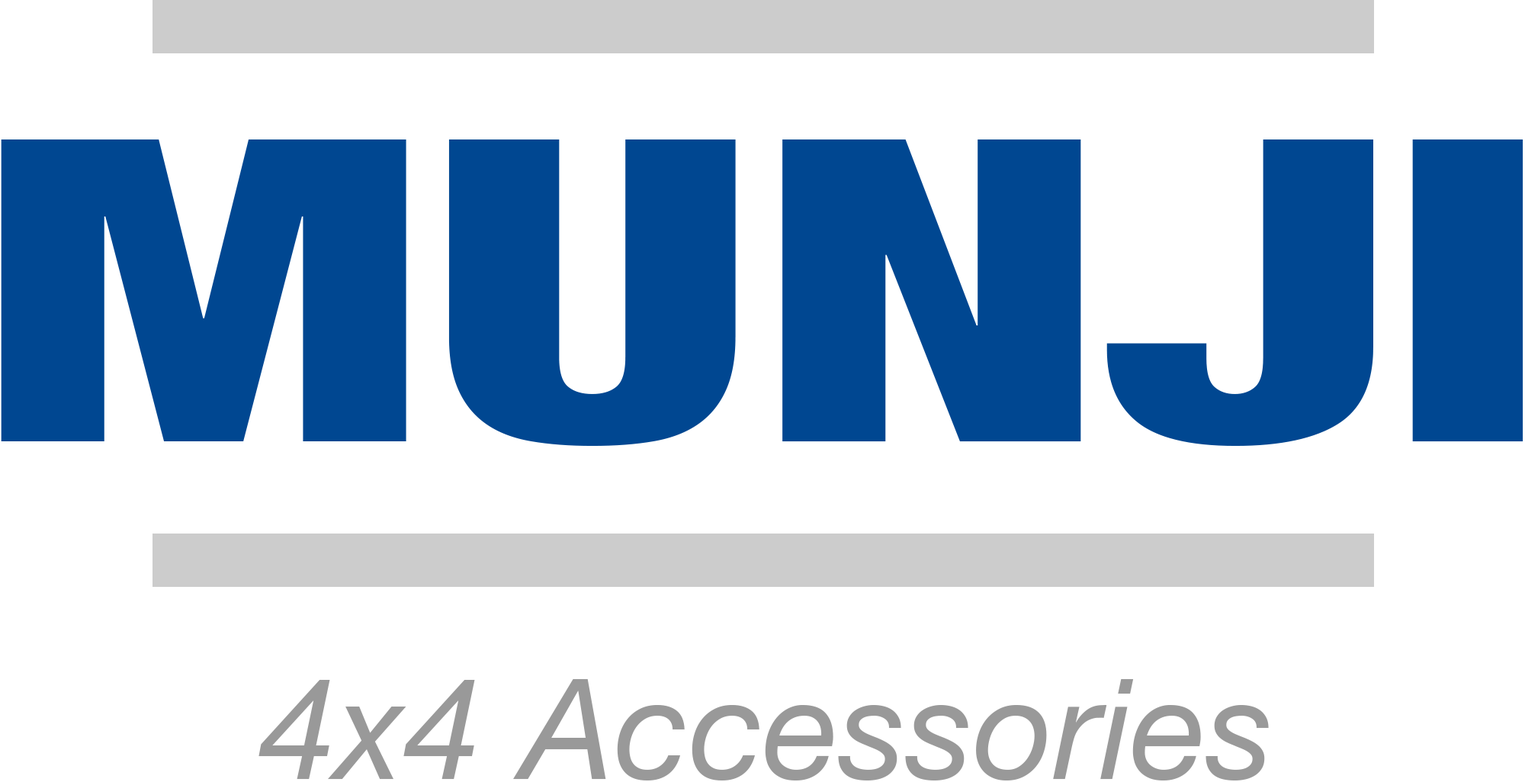
<style>
.page{position:relative;width:1525px;height:782px;background:#ffffff}
.page>*{position:absolute;margin:0}
.t1{font:422.5px "HelveticaNeue-CondensedBlack";color:#004791;scale:1.4 1}
.t2{font:139.8px "HelveticaNeue-Italic";color:#999999}
</style>
<div class="page">
<p class="t1" style="left:1px;top:140px;width:1522px;height:306px">MUNJI</p>
<p class="t2" style="left:258px;top:679px;width:1010px;height:102px">4x4 Accessories</p>
</div>
